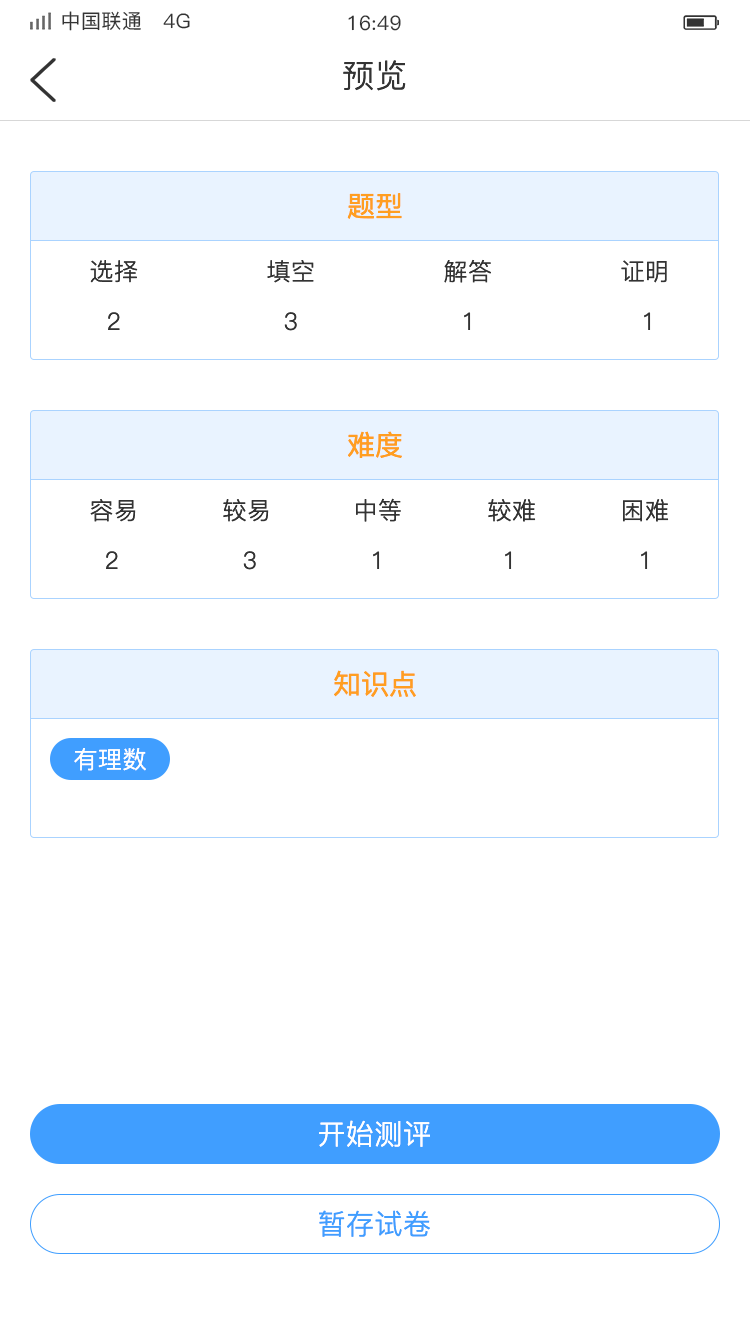
<style>
.page{position:relative;width:750px;height:1334px;background:#ffffff}
.page>*{position:absolute;margin:0}
.t1{font:20px "PingFang-SC-Medium";letter-spacing:0.02em;color:#333333}
.t2{font:32px "PingFang-SC-Regular";letter-spacing:0.02em;color:#333333}
.t3{font:28px "PingFang-SC-Medium";color:#ff9e21}
.t4{font:24px "PingFang-SC-Regular";letter-spacing:0.02em;color:#333333}
.t5{font:24px "PingFang-SC-Regular";letter-spacing:0.02em;color:#ffffff}
.t6{font:28px "PingFang-SC-Regular";letter-spacing:0.02em;color:#ffffff}
.t7{font:28px "PingFang-SC-Regular";letter-spacing:0.02em;color:#409eff}
</style>
<div class="page">
<p class="t1" style="left:62px;top:11px;width:128px;height:20px">中国联通   4G</p>
<p class="t1" style="left:348px;top:15px;width:53px;height:16px">16:49</p>
<p class="t2" style="left:343px;top:60px;width:63px;height:31px">预览</p>
<p class="t3" style="left:347px;top:193px;width:55px;height:26px">题型</p>
<p class="t4" style="left:90px;top:260px;width:48px;height:23px">选择</p>
<p class="t4" style="left:267px;top:260px;width:47px;height:23px">填空</p>
<p class="t4" style="left:444px;top:259px;width:47px;height:24px">解答</p>
<p class="t4" style="left:621px;top:260px;width:46px;height:23px">证明</p>
<p class="t4" style="left:108px;top:312px;width:12px;height:18px">2</p>
<p class="t4" style="left:284px;top:312px;width:13px;height:19px">3</p>
<p class="t4" style="left:464px;top:312px;width:7px;height:18px">1</p>
<p class="t4" style="left:644px;top:312px;width:7px;height:18px">1</p>
<p class="t3" style="left:348px;top:431px;width:54px;height:27px">难度</p>
<p class="t4" style="left:90px;top:499px;width:46px;height:23px">容易</p>
<p class="t4" style="left:223px;top:499px;width:46px;height:23px">较易</p>
<p class="t4" style="left:356px;top:498px;width:45px;height:24px">中等</p>
<p class="t4" style="left:488px;top:499px;width:48px;height:23px">较难</p>
<p class="t4" style="left:623px;top:499px;width:46px;height:23px">困难</p>
<p class="t4" style="left:106px;top:551px;width:12px;height:18px">2</p>
<p class="t4" style="left:243px;top:551px;width:13px;height:19px">3</p>
<p class="t4" style="left:373px;top:551px;width:7px;height:18px">1</p>
<p class="t4" style="left:505px;top:551px;width:7px;height:18px">1</p>
<p class="t4" style="left:641px;top:551px;width:7px;height:18px">1</p>
<p class="t3" style="left:334px;top:670px;width:82px;height:27px">知识点</p>
<p class="t5" style="left:74px;top:748px;width:72px;height:23px">有理数</p>
<p class="t6" style="left:319px;top:1120px;width:111px;height:27px">开始测评</p>
<p class="t7" style="left:319px;top:1210px;width:111px;height:27px">暂存试卷</p>
</div>
